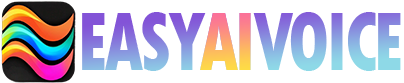
<style>
.page{position:relative;width:404px;height:83px;background:#ffffff}
.page>*{position:absolute;margin:0}
.t1{font:87px "TwCenMT-CondensedExtraBold";letter-spacing:-0.05em;scale:0.85 1}
</style>
<div class="page">
<p class="t1" style="left:82px;top:12px;width:319px;height:59px">EASYAIVOICE</p>
<p class="t1" style="left:200px;top:13px;width:51px;height:57px">AI</p>
</div>
